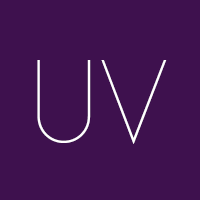
<style>
.page{position:relative;width:200px;height:200px;background:#3e114e}
.page>*{position:absolute;margin:0}
.t1{font:100px "Edelsans-UltraLight";color:#ffffff}
</style>
<div class="page">
<p class="t1" style="left:37px;top:60px;width:130px;height:84px">UV</p>
</div>
